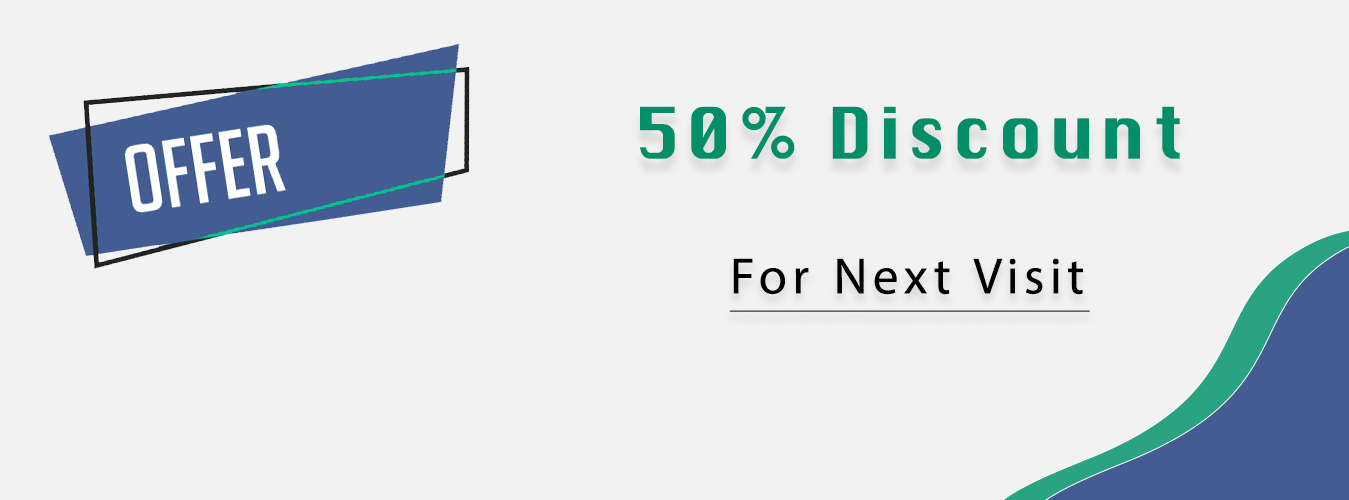
<style>
.page{position:relative;width:1349px;height:500px;background:#f2f2f2}
.page>*{position:absolute;margin:0}
.t1{font:69px "Krungthep";letter-spacing:0.075em;color:#028e69}
.t2{font:72px "MyriadArabic-Regular";letter-spacing:0.075em;color:#000000;text-decoration:underline}
</style>
<div class="page">
<p class="t1" style="left:640px;top:106px;width:540px;height:53px">50% Discount</p>
<p class="t2" style="left:729px;top:258px;width:361px;height:54px">For Next Visit</p>
</div>
